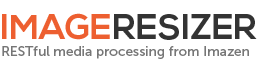
<style>
.page{position:relative;width:257px;height:59px;background:#ffffff}
.page>*{position:absolute;margin:0}
.t1{font:35px "NexaBold";color:#333333;text-transform:uppercase}
.t2{font:35px "NexaBold";color:#ed5f30;text-transform:uppercase}
.t3{font:13.8px "MuseoSans-500";color:#767676}
</style>
<div class="page">
<p class="t1" style="left:2px;top:13px;width:255px;height:27px"><span class="t2">Image</span>Resizer</p>
<p class="t3" style="left:2px;top:46px;width:247px;height:13px">RESTful media processing from Imazen</p>
</div>
